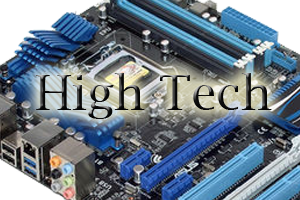
<style>
.page{position:relative;width:300px;height:200px}
.page>*{position:absolute;margin:0}
.t1{font:48px "LucidaBright";color:#111111}
</style>
<div class="page">
<p class="t1" style="left:36px;top:73px;width:236px;height:46px">High Tech</p>
</div>
